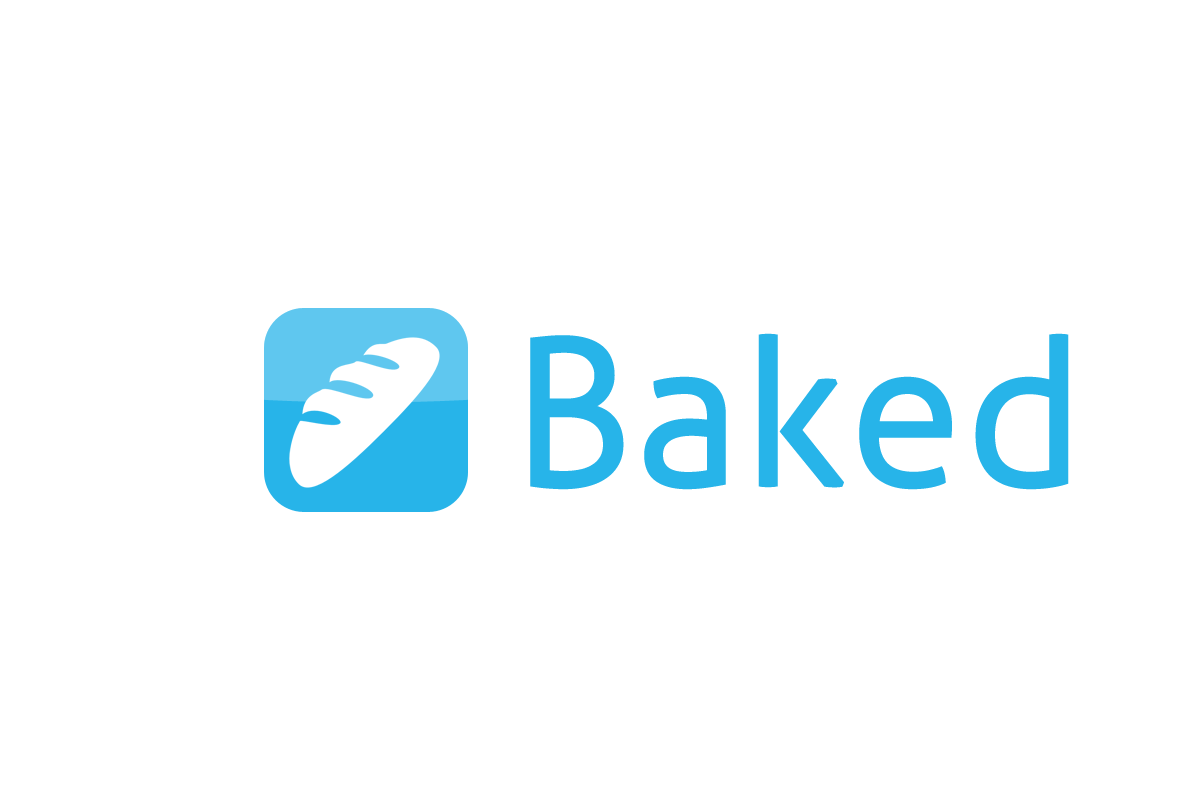
<style>
.page{position:relative;width:1200px;height:800px;background:#ffffff}
.page>*{position:absolute;margin:0}
.t1{font:200px "Aller-Light";color:#27b4e9;font-weight:bold}
</style>
<div class="page">
<p class="t1" style="left:530px;top:333px;width:539px;height:157px">Baked</p>
</div>
